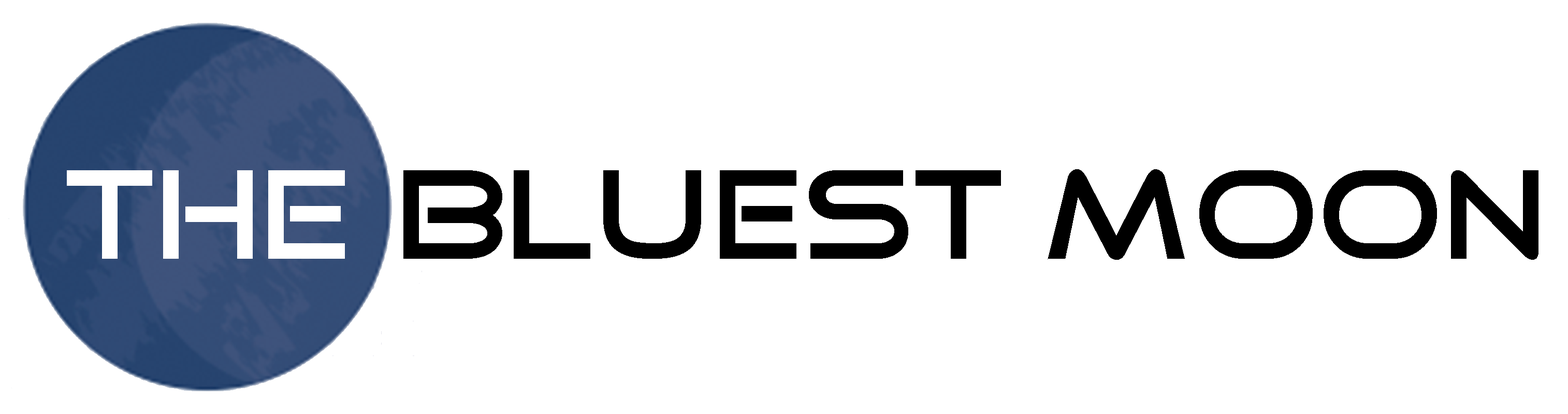
<style>
.page{position:relative;width:1568px;height:414px;background:#ffffff}
.page>*{position:absolute;margin:0}
.t1{font:129.5px "GoodTimes";color:#000000}
.t2{font:129.5px "GoodTimes";color:#ffffff}
</style>
<div class="page">
<p class="t1" style="left:67px;top:169px;width:1471px;height:91px"><span class="t2">the</span> bluest moon</p>
</div>
